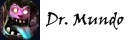
<style>
.page{position:relative;width:140px;height:40px;background:#ffffff}
.page>*{position:absolute;margin:0}
.t1{font:12px "VinerHandITC";color:#000000}
</style>
<div class="page">
<p class="t1" style="left:45px;top:11px;width:79px;height:19px">Dr. Mundo</p>
</div>
